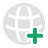
<style>
.page{position:relative;width:48px;height:48px;background:#ffffff}
.page>*{position:absolute;margin:0}
.t1{font:32px "GeometrySoftPro-BoldN";color:#18a464}
</style>
<div class="page">
<p class="t1" style="left:26px;top:27px;width:18px;height:17px">+</p>
<p class="t1" style="left:26px;top:27px;width:18px;height:17px">+</p>
</div>
